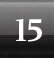
<style>
.page{position:relative;width:54px;height:58px}
.page>*{position:absolute;margin:0}
.t1{font:32px "Constantia-Bold";color:#ffffff}
</style>
<div class="page">
<p class="t1" style="left:15px;top:19px;width:27px;height:23px">15</p>
</div>
